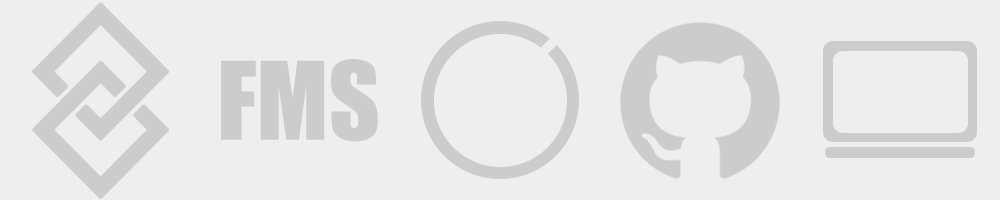
<style>
.page{position:relative;width:1000px;height:200px;background:#eeeeee}
.page>*{position:absolute;margin:0}
.t1{font:100px "Impact";color:#cccccc}
</style>
<div class="page">
<p class="t1" style="left:221px;top:59px;width:157px;height:83px">FMS</p>
</div>
